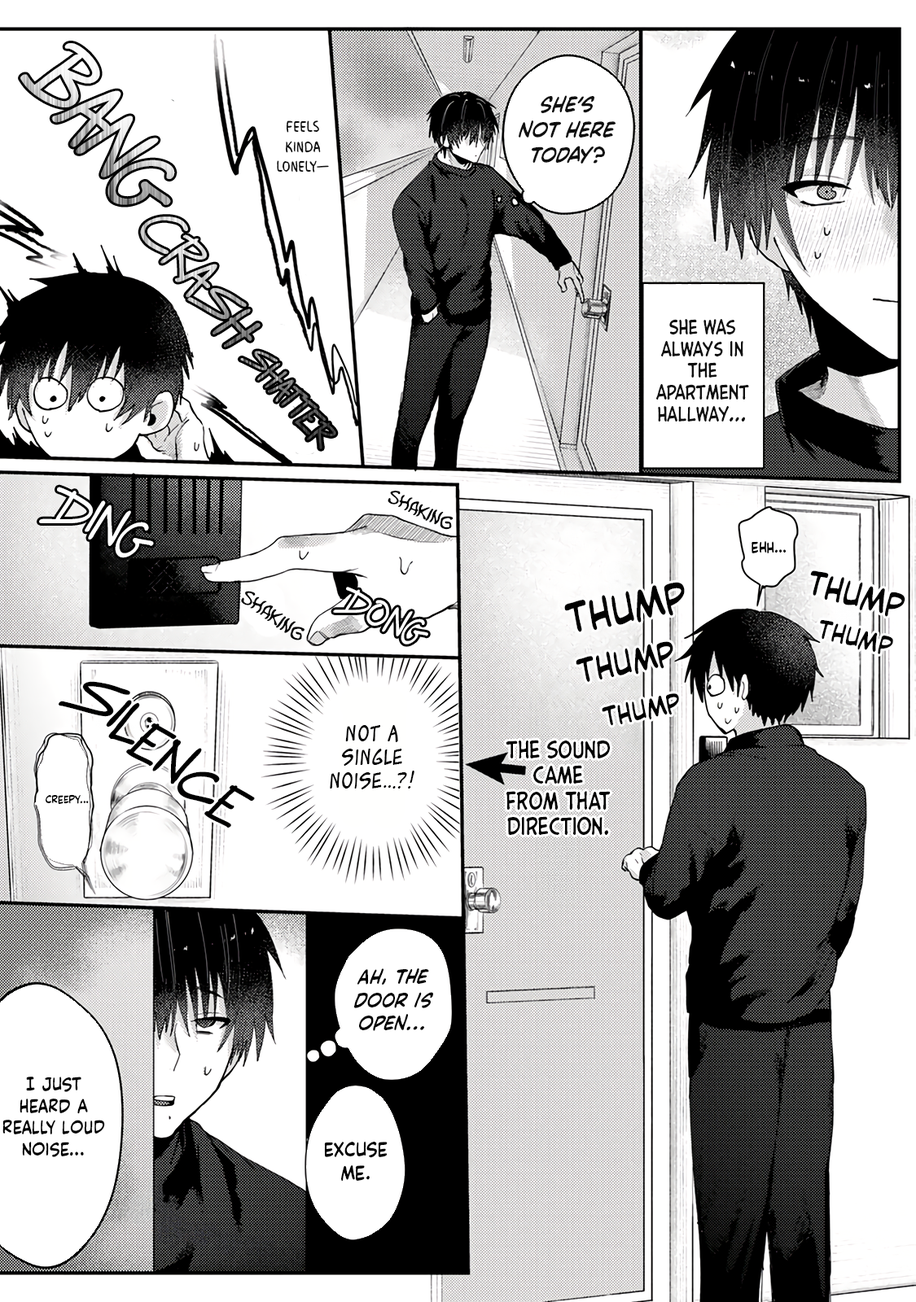
<style>
.page{position:relative;width:916px;height:1302px;background:#ffffff}
.page>*{position:absolute;margin:0}
.t1{font:20.9px "CCVictorySpeech-Italic";color:#0f0f0f}
.t2{font:16.5px "MilkMustacheBB";color:#0f0f0f}
.t3{font:18.2px "CCSamaritanTall-Regular";color:#0f0f0f}
.t4{font:51.8px "Raggedways";color:#ffffff}
.t5{font:18.9px "KomikaBoo";color:#000000}
.t6{font:14.6px "CCVictorySpeech-Regular";color:#000000}
.t7{font:42.3px "CCVictorySpeech-Regular";color:#000000}
.t8{font:34.1px "CCVictorySpeech-Regular";color:#000000}
.t9{font:19.6px "KomikaBoo";color:#000000}
.t10{font:26.1px "CCVictorySpeech-Regular";color:#000000}
.t11{font:63.3px "Raggedways";color:#000000}
.t12{font:27.1px "CCVictorySpeech-Regular";color:#000000}
.t13{font:19.5px "ZudJuice";color:#000000}
.t14{font:21.1px "CCSamaritanTall-Regular";color:#000000}
.t15{font:10.8px "CCVictorySpeech-Regular";color:#000000}
.t16{font:19.5px "CCVictorySpeech-Italic";color:#000000}
.t17{font:18.1px "CCVictorySpeech-Regular";color:#000000}
.t18{font:19.5px "CCVictorySpeech-Regular";color:#000000}
</style>
<div class="page">
<p class="t1" style="left:518px;top:95px;width:97px;height:69px;text-align:center">She’s not here today?</p>
<p class="t2" style="left:277px;top:120px;width:52px;height:53px;text-align:center">Feels kinda lonely—</p>
<p class="t3" style="left:656px;top:319px;width:93px;height:103px;text-align:center">She was always in the apartment hallway…</p>
<p class="t4" style="left:39px;top:487px;width:115px;height:71px;rotate:27deg">DING</p>
<p class="t5" style="left:387px;top:491px;width:66px;height:39px;rotate:25deg">Shaking</p>
<p class="t6" style="left:751px;top:541px;width:35px;height:12px">Ehh...</p>
<p class="t7" style="left:564px;top:582px;width:121px;height:50px;rotate:-11deg">Thump</p>
<p class="t8" style="left:810px;top:571px;width:95px;height:46px;rotate:15deg">Thump</p>
<p class="t9" style="left:241px;top:591px;width:63px;height:50px;rotate:35deg">Shaking</p>
<p class="t10" style="left:820px;top:620px;width:73px;height:34px;rotate:15deg">Thump</p>
<p class="t8" style="left:575px;top:641px;width:98px;height:41px;rotate:-11deg">Thump</p>
<p class="t11" style="left:59px;top:681px;width:196px;height:147px;rotate:39deg">Silence…</p>
<p class="t12" style="left:601px;top:693px;width:78px;height:33px;rotate:-11deg">Thump</p>
<p class="t13" style="left:330px;top:725px;width:84px;height:65px;text-align:center">Not a single noise…?!</p>
<p class="t14" style="left:505px;top:740px;width:105px;height:95px;text-align:center">The sound came from that direction.</p>
<p class="t15" style="left:46px;top:794px;width:43px;height:10px">Creepy…</p>
<p class="t16" style="left:354px;top:969px;width:79px;height:62px;text-align:center">Ah, the door is open...</p>
<p class="t17" style="left:2px;top:1077px;width:103px;height:80px;text-align:center">I just heard a really loud noise…</p>
<p class="t18" style="left:324px;top:1141px;width:63px;height:41px;text-align:center">Excuse me.</p>
</div>
